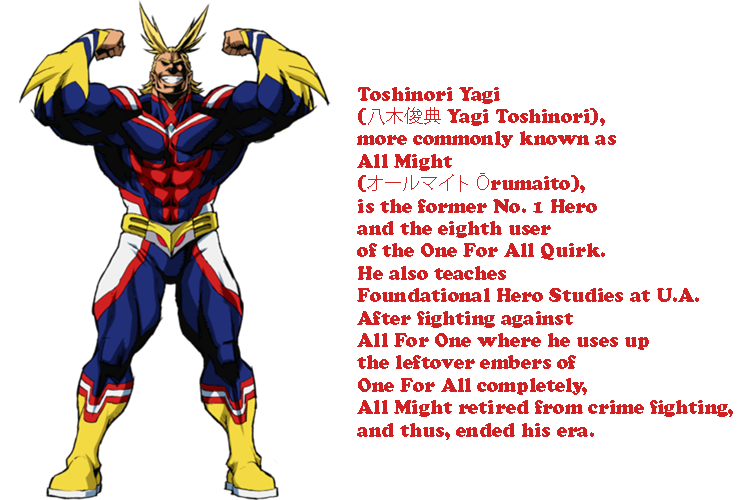
<style>
.page{position:relative;width:750px;height:500px;background:#ffffff}
.page>*{position:absolute;margin:0}
.t1{font:18.7px "CooperBlackStd";color:#d02021}
.t2{font:18.7px "KozGoPr6N-Regular";color:#d02021}
</style>
<div class="page">
<p class="t1" style="left:357px;top:87px;width:376px;height:353px">Toshinori Yagi <br>(<span class="t2">八木俊典</span> Yagi Toshinori), <br>more commonly known as <br>All Might <br>(<span class="t2">オールマイト Ō</span>rumaito), <br>is the former No. 1 Hero <br>and the eighth user <br>of the One For All Quirk. <br>He also teaches <br>Foundational Hero Studies at U.A. <br>After fighting against <br>All For One where he uses up <br>the leftover embers of <br>One For All completely, <br>All Might retired from crime fighting, <br>and thus, ended his era.</p>
</div>
